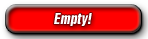
<style>
.page{position:relative;width:148px;height:39px;background:#ff0000}
.page>*{position:absolute;margin:0}
.t1{font:14px "ARubricaCnBoldItalic";color:#ffffff}
</style>
<div class="page">
<p class="t1" style="left:54px;top:13px;width:38px;height:13px">Empty!</p>
</div>
